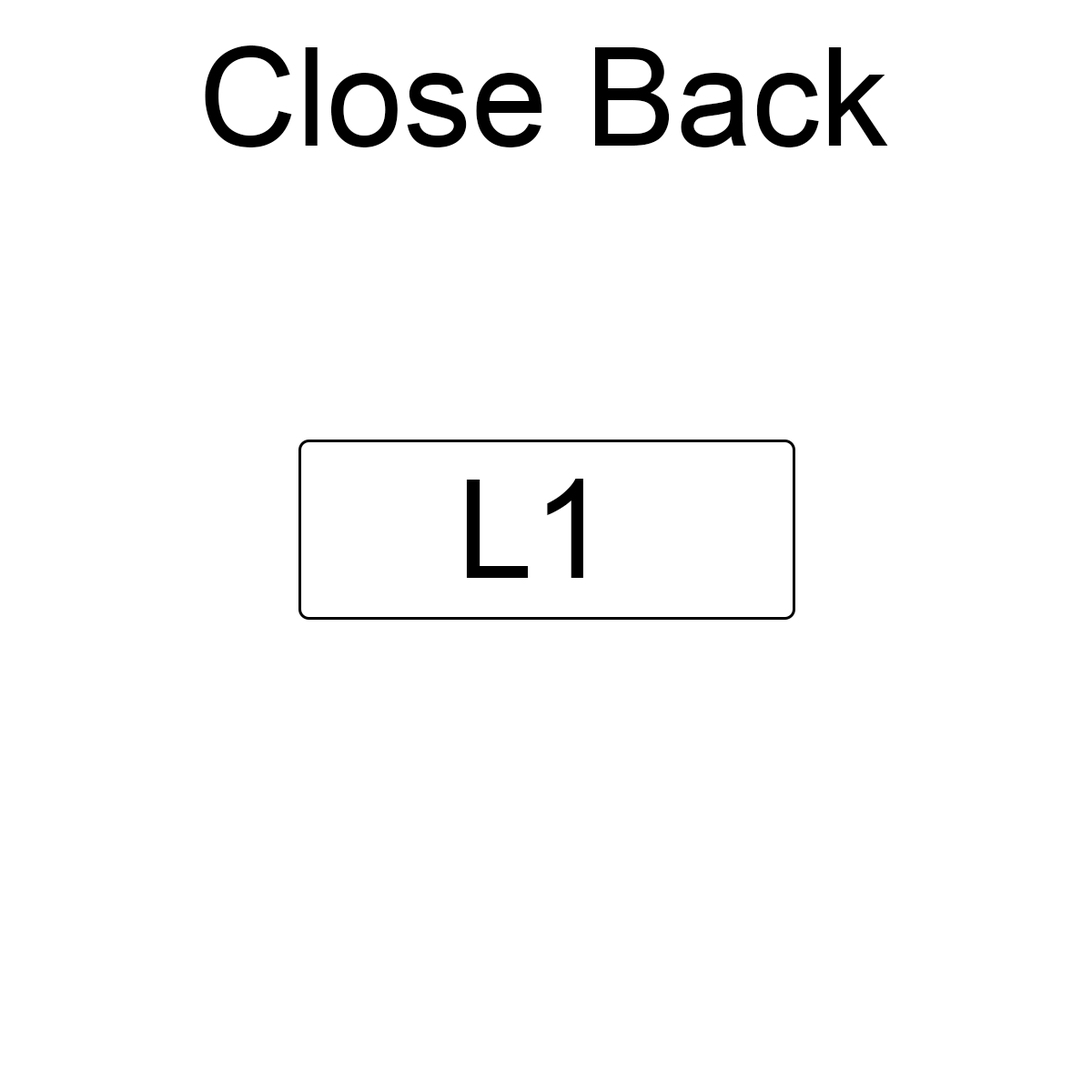
<style>
.page{position:relative;width:1092px;height:1092px;background:#ffffff}
.page>*{position:absolute;margin:0}
.t1{font:136.5px "ArialMT";color:#000000}
</style>
<div class="page">
<p class="t1" style="left:205px;top:45px;width:683px;height:102px">Close Back</p>
<p class="t1" style="left:466px;top:479px;width:117px;height:99px">L1</p>
</div>
